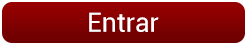
<style>
.page{position:relative;width:247px;height:45px}
.page>*{position:absolute;margin:0}
.t1{font:26.6px "Roboto-Regular";color:#ffffff}
</style>
<div class="page">
<p class="t1" style="left:89px;top:12px;width:70px;height:20px">Entrar</p>
</div>
